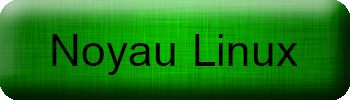
<style>
.page{position:relative;width:350px;height:100px}
.page>*{position:absolute;margin:0}
.t1{font:50.4px "Miriam";color:#000000}
</style>
<div class="page">
<p class="t1" style="left:52px;top:34px;width:246px;height:41px">Noyau Linux</p>
</div>
